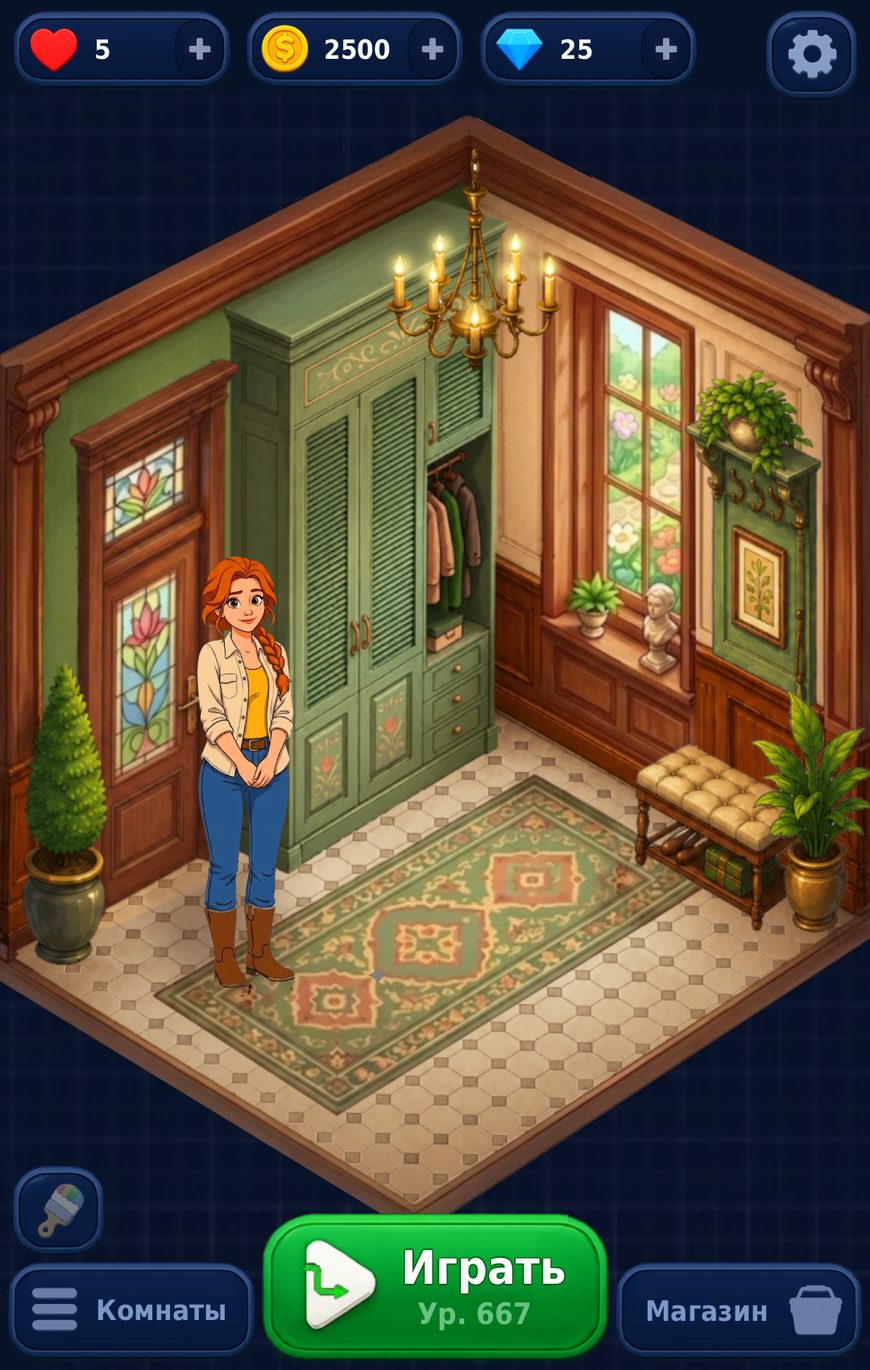
<style>
.page{position:relative;width:870px;height:1370px}
.page>*{position:absolute;margin:0}
.t1{font:26.6px "DejaVuSansCondensed-Bold";color:#ffffff}
.t2{font:46.2px "DejaVuSansCondensed-Bold";color:#ffffff}
.t3{font:28.2px "DejaVuSansCondensed-Bold";color:#7e96c7}
.t4{font:29.6px "DejaVuSansCondensed-Bold";color:#6ac283}
</style>
<div class="page">
<p class="t1" style="left:96px;top:39px;width:14px;height:21px">5</p>
<p class="t1" style="left:326px;top:39px;width:64px;height:21px">2500</p>
<p class="t1" style="left:562px;top:39px;width:30px;height:21px">25</p>
<p class="t2" style="left:405px;top:1250px;width:160px;height:43px">Играть</p>
<p class="t3" style="left:98px;top:1299px;width:127px;height:22px">Комнаты</p>
<p class="t4" style="left:418px;top:1302px;width:112px;height:29px">Ур. 667</p>
<p class="t3" style="left:647px;top:1300px;width:120px;height:22px">Магазин</p>
</div>
